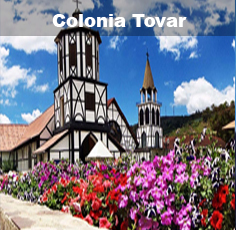
<style>
.page{position:relative;width:236px;height:230px}
.page>*{position:absolute;margin:0}
.t1{font:18px "Arial-Black";color:#ffffff}
</style>
<div class="page">
<p class="t1" style="left:52px;top:14px;width:135px;height:13px">Colonia Tovar</p>
</div>
